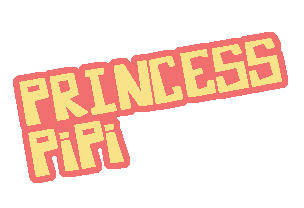
<style>
.page{position:relative;width:304px;height:208px;background:#ffffff}
.page>*{position:absolute;margin:0}
.t1{font:61.8px/51.5px "Martilo-Regular";color:#f8e389;font-weight:bold}
</style>
<div class="page">
<p class="t1" style="left:19px;top:38px;width:263px;height:139px;rotate:-10deg">PRINCESS<br>PiPi</p>
</div>
